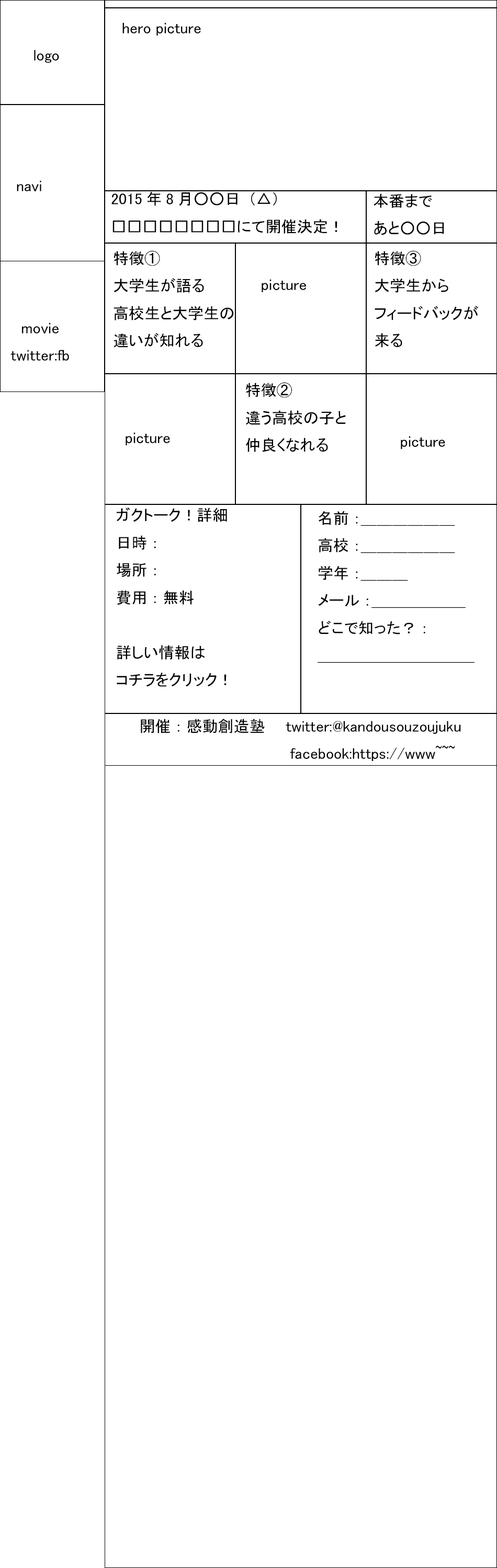
<style>
.page{position:relative;width:497px;height:1568px;background:#ffffff}
.page>*{position:absolute;margin:0}
.t1{font:15.7px "MS-PGothic";color:#000000}
</style>
<div class="page">
<p class="t1" style="left:122px;top:22px;width:79px;height:14px">hero picture</p>
<p class="t1" style="left:34px;top:50px;width:25px;height:13px">logo</p>
<p class="t1" style="left:17px;top:180px;width:24px;height:11px">navi</p>
<p class="t1" style="left:111px;top:192px;width:226px;height:42px">2015年8月○○日（△）<br>□□□□□□□□にて開催決定！</p>
<p class="t1" style="left:373px;top:194px;width:71px;height:41px">本番まで<br>あと○○日</p>
<p class="t1" style="left:113px;top:250px;width:121px;height:98px">特徴①<br>大学生が語る<br>高校生と大学生の<br>違いが知れる</p>
<p class="t1" style="left:374px;top:250px;width:104px;height:98px">特徴③<br>大学生から<br>フィードバックが<br>来る</p>
<p class="t1" style="left:261px;top:279px;width:45px;height:13px">picture</p>
<p class="t1" style="left:10px;top:322px;width:59px;height:39px;text-align:center">movie<br>twitter:fb</p>
<p class="t1" style="left:245px;top:382px;width:100px;height:70px">特徴②<br>違う高校の子と<br>仲良くなれる</p>
<p class="t1" style="left:125px;top:432px;width:45px;height:13px">picture</p>
<p class="t1" style="left:400px;top:436px;width:45px;height:13px">picture</p>
<p class="t1" style="left:117px;top:507px;width:110px;height:180px">ガクトーク！詳細<br>日時：<br>場所：<br>費用：無料<br><br>詳しい情報は<br>コチラをクリック！</p>
<p class="t1" style="left:317px;top:511px;width:157px;height:152px">名前：＿＿＿＿＿＿<br>高校：＿＿＿＿＿＿<br>学年：＿＿＿<br>メール：＿＿＿＿＿＿<br>どこで知った？：<br>＿＿＿＿＿＿＿＿＿＿</p>
<p class="t1" style="left:141px;top:719px;width:319px;height:42px">開催：感動創造塾　　twitter:@kandousouzoujuku<br>        facebook:https://www~~~</p>
</div>
